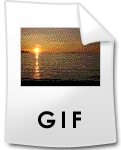
<style>
.page{position:relative;width:121px;height:150px}
.page>*{position:absolute;margin:0}
.t1{font:23px "CenturyGothic-Bold";letter-spacing:0.18em;color:#000000}
</style>
<div class="page">
<p class="t1" style="left:38px;top:111px;width:43px;height:18px">GIF</p>
</div>
